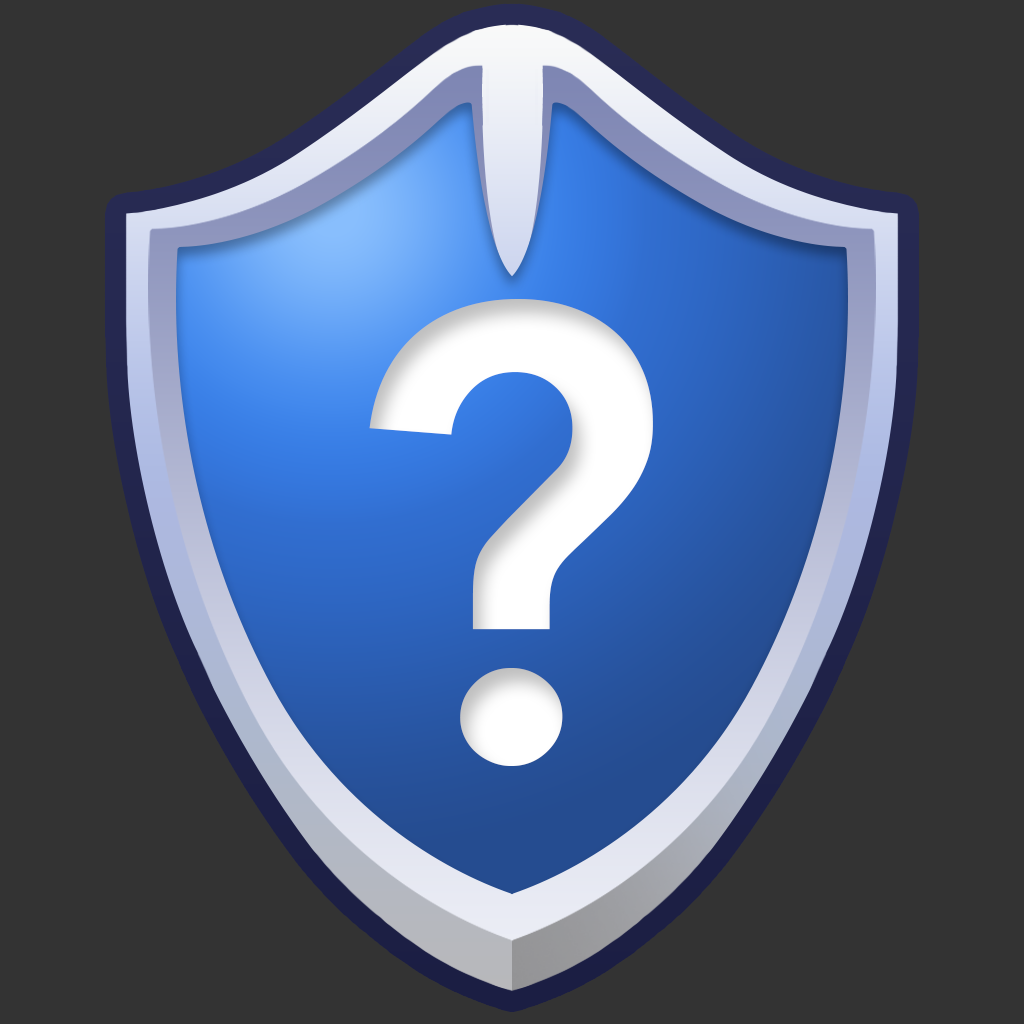
<style>
.page{position:relative;width:1024px;height:1024px;background:#333333}
.page>*{position:absolute;margin:0}
.t1{font:637.5px "Avenir-Heavy";letter-spacing:-0.025em;color:#ffffff}
</style>
<div class="page">
<p class="t1" style="left:369px;top:299px;width:284px;height:467px">?</p>
</div>
